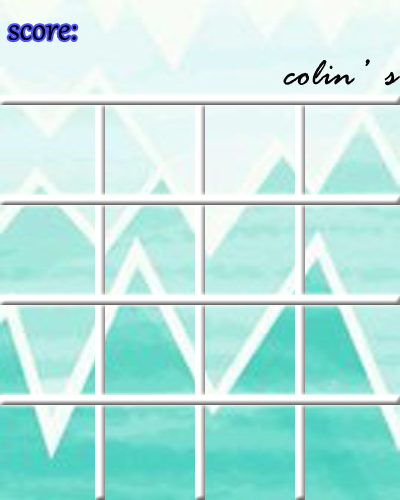
<style>
.page{position:relative;width:400px;height:500px}
.page>*{position:absolute;margin:0}
.t1{font:40px "Gabriola";color:#000000}
.t2{font:40px "RageItalic";color:#070606}
</style>
<div class="page">
<p class="t1" style="left:8px;top:25px;width:69px;height:16px">score:</p>
<p class="t2" style="left:283px;top:59px;width:117px;height:27px">colin’s</p>
</div>
